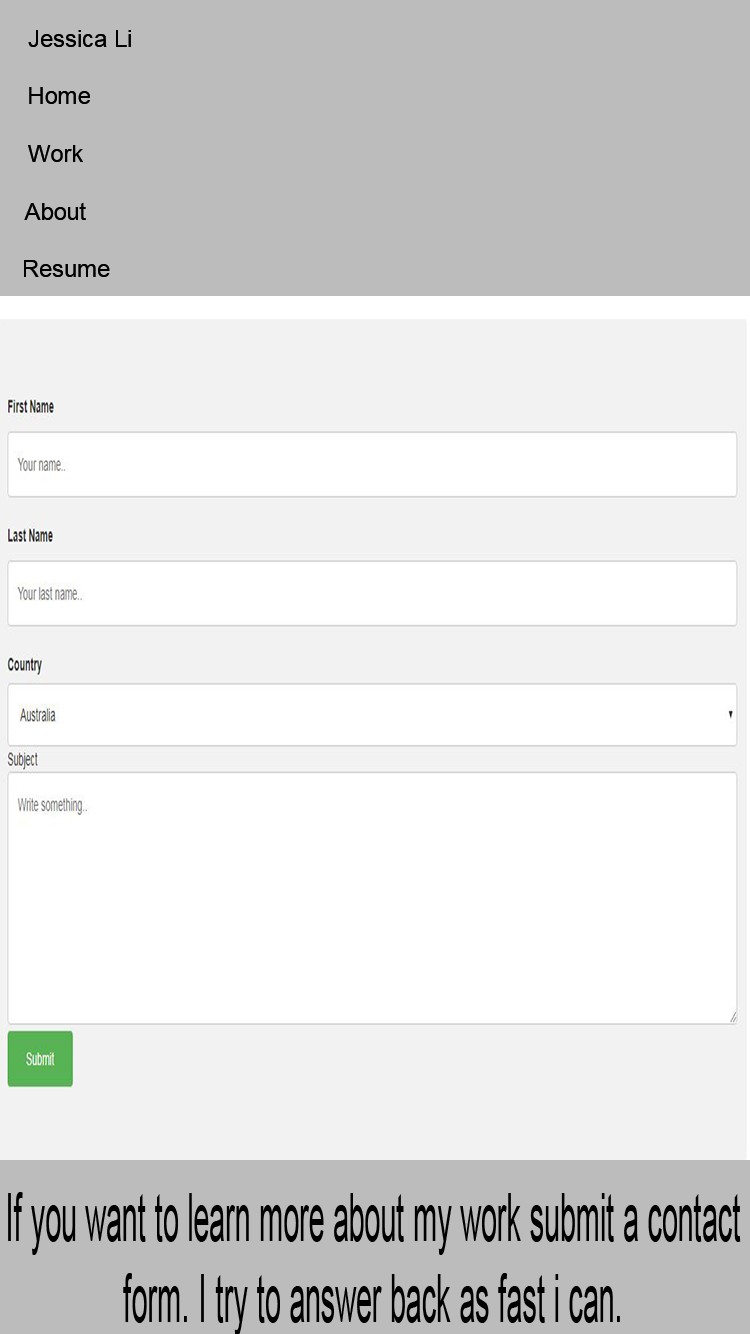
<style>
.page{position:relative;width:750px;height:1334px;background:#ffffff}
.page>*{position:absolute;margin:0}
.t1{font:24px "ArialMT";color:#000000}
.t2{font:66.9px "ArialMT";color:#000000;scale:0.44 1}
</style>
<div class="page">
<p class="t1" style="left:24px;top:30px;width:107px;height:247px;text-align:center">Jessica Li<br><br> Home<br><br>Work<br> <br>About<br><br>   Resume</p>
<p class="t2" style="left:8px;top:1192px;width:733px;height:144px;text-align:center">If you want to learn more about my work submit a contact form. I try to answer back as fast i can.</p>
</div>
